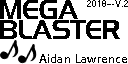
<style>
.page{position:relative;width:128px;height:64px;background:#ffffff}
.page>*{position:absolute;margin:0}
.t1{font:24px/20px "HighlandGothicFLF";color:#000000}
.t2{font:9.7px "Helvetica";letter-spacing:0.002em;color:#000000;scale:0.9 1}
.t3{font:12.3px "SegoeUI-Semibold";color:#000000}
</style>
<div class="page">
<p class="t1" style="left:0px;top:0px;width:120px;height:39px">MEGA<br>BLASTER</p>
<p class="t2" style="left:87px;top:0px;width:41px;height:7px">2018---V.2</p>
<p class="t3" style="left:39px;top:54px;width:88px;height:9px">Aidan Lawrence</p>
</div>
